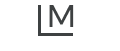
<style>
.page{position:relative;width:120px;height:51px;background:#ffffff}
.page>*{position:absolute;margin:0}
.t1{font:31.8px "Montserrat-Regular";letter-spacing:0.2em;color:#3e4142}
</style>
<div class="page">
<p class="t1" style="left:49px;top:5px;width:25px;height:22px">M</p>
</div>
